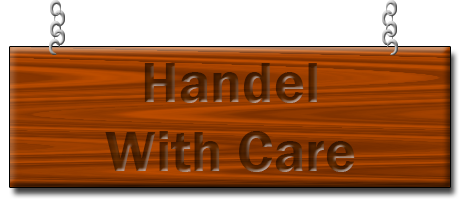
<style>
.page{position:relative;width:460px;height:200px;background:#ffffff}
.page>*{position:absolute;margin:0}
.t1{font:58px "FranklinGothic-Demi";color:#492400}
</style>
<div class="page">
<p class="t1" style="left:105px;top:63px;width:250px;height:109px;text-align:center;opacity:0.73">Handel<br>With Care</p>
</div>
